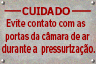
<style>
.page{position:relative;width:96px;height:64px}
.page>*{position:absolute;margin:0}
.t1{font:11px "FelbridgeStd-Bold";color:#a50000;font-weight:bold;scale:0.9 1}
.t2{font:11px "FelbridgeStd-Bold";color:#a50000;scale:0.76 1}
.t3{font:10.5px "FelbridgeStd-Bold";color:#a50000;scale:0.76 1}
.t4{font:12px "FelbridgeStd-Bold";color:#a50000;scale:0.67 1}
</style>
<div class="page">
<p class="t1" style="left:22px;top:7px;width:48px;height:9px">CUIDADO</p>
<p class="t2" style="left:6px;top:19px;width:80px;height:8px">Evite contato com as</p>
<p class="t3" style="left:5px;top:32px;width:85px;height:10px">portas da câmara de ar</p>
<p class="t4" style="left:2px;top:44px;width:93px;height:11px">durante a  pressurização.</p>
</div>
